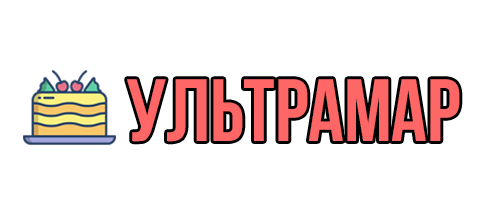
<style>
.page{position:relative;width:500px;height:200px;background:#ffffff}
.page>*{position:absolute;margin:0}
.t1{font:88.3px "Netflix-(Bebas-Neue)";color:#ff6666}
</style>
<div class="page">
<p class="t1" style="left:127px;top:79px;width:333px;height:63px">ультрамар</p>
</div>
